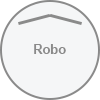
<style>
.page{position:relative;width:100px;height:100px;background:#f5f6f7}
.page>*{position:absolute;margin:0}
.t1{font:12.9px "Arial-BoldMT";color:#8a8a8a}
</style>
<div class="page">
<p class="t1" style="left:34px;top:44px;width:32px;height:10px">Robo</p>
</div>
